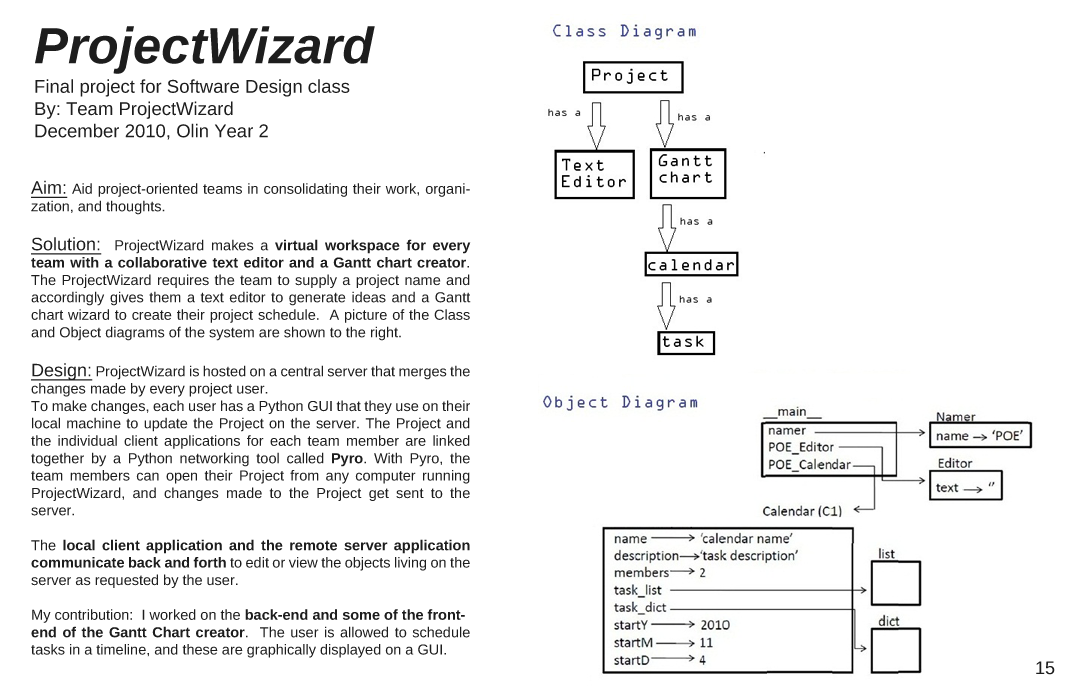
<style>
.page{position:relative;width:1080px;height:700px;background:#ffffff}
.page>*{position:absolute;margin:0}
.t1{font:18.5px "LiberationSans";color:#1d1d1d}
.t2{font:50.9px "LiberationSans-BoldItalic";color:#1d1d1d}
.t3{font:14.5px "LiberationSans";color:#1d1d1d}
.t4{font:18px "LiberationSans";color:#1d1d1d;text-decoration:underline}
.t5{font:14.5px "LiberationSans-Bold";color:#1d1d1d}
.t6{font:18px "LiberationSans";color:#1d1d1d}
</style>
<div class="page">
<p class="t1" style="left:35px;top:26px;width:340px;height:114px;text-align:justify"><span class="t2">ProjectWizard<br><br></span>Final project for Software Design class<br>By: Team ProjectWizard<br>December 2010, Olin Year 2</p>
<p class="t3" style="left:31px;top:180px;width:440px;height:478px;text-align:justify"><span class="t4">Aim: </span>Aid project-oriented teams in consolidating their work, organization, and thoughts.<br><br><span class="t4">Solution:  </span>ProjectWizard makes a <span class="t5">virtual workspace for every team with a collaborative text editor and a Gantt chart creator</span>. The ProjectWizard requires the team to supply a project name and accordingly gives them a text editor to generate ideas and a Gantt chart wizard to create their project schedule.  A picture of the Class and Object diagrams of the system are shown to the right.<br><br><span class="t4">Design: </span>ProjectWizard is hosted on a central server that merges the changes made by every project user. <br>To make changes, each user has a Python GUI that they use on their local machine to update the Project on the server. The Project and the individual client applications for each team member are linked together by a Python networking tool called <span class="t5">Pyro</span>. With Pyro, the team members can open their Project from any computer running ProjectWizard, and changes made to the Project get sent to the server. <br><br>The <span class="t5">local client application and the remote server application communicate back and forth</span> to edit or view the objects living on the server as requested by the user.<br><br>My contribution:  I worked on the <span class="t5">back-end and some of the front-end of the Gantt Chart creator</span>.  The user is allowed to schedule tasks in a timeline, and these are graphically displayed on a GUI.</p>
<p class="t6" style="left:1036px;top:661px;width:19px;height:14px">15</p>
</div>
